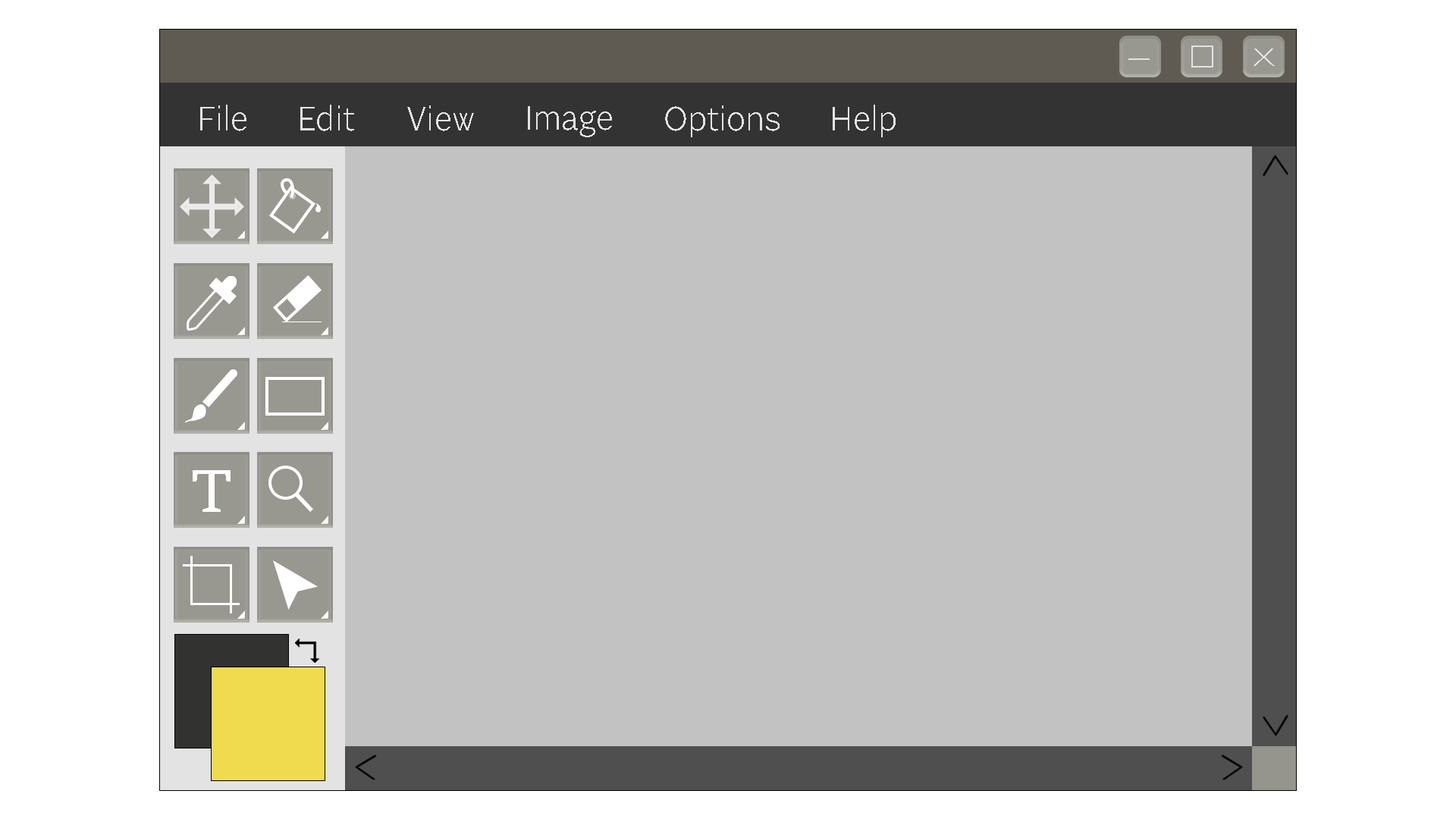
<style>
.page{position:relative;width:1456px;height:819px;background:#c2c2c2}
.page>*{position:absolute;margin:0}
.t1{font:36.6px "SoleSansVF-ExtendedLight";color:#e3e3e3;scale:1.37 1}
.t2{font:36.4px "SoleSansVF_250.000wght_100.000wdth_0ital";color:#e3e3e3}
.t3{font:63.7px "Sitka-Small";color:#fefefe}
</style>
<div class="page">
<p class="t1" style="left:1254px;top:49px;width:21px;height:17px">x</p>
<p class="t2" style="left:200px;top:105px;width:46px;height:26px">File</p>
<p class="t2" style="left:300px;top:105px;width:54px;height:26px">Edit</p>
<p class="t2" style="left:407px;top:105px;width:67px;height:26px">View</p>
<p class="t2" style="left:528px;top:106px;width:84px;height:31px">Image</p>
<p class="t2" style="left:665px;top:105px;width:115px;height:32px">Options</p>
<p class="t2" style="left:833px;top:105px;width:63px;height:32px">Help</p>
<p class="t3" style="left:193px;top:470px;width:38px;height:42px">T</p>
</div>
